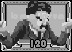
<style>
.page{position:relative;width:72px;height:52px}
.page>*{position:absolute;margin:0}
.t1{font:10px "Bauhaus93";color:#c2c2c2}
.t2{font:10px "Bauhaus93";color:#929292}
</style>
<div class="page">
<p class="t1" style="left:11px;top:12px;width:53px;height:9px">Lorem Ipsum</p>
<p class="t2" style="left:31px;top:40px;width:15px;height:7px">120</p>
</div>
